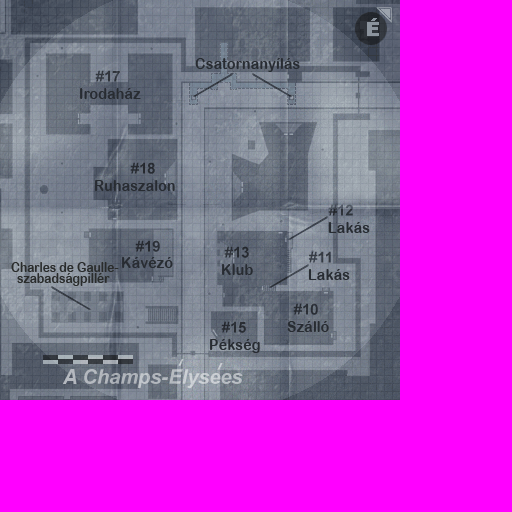
<style>
.page{position:relative;width:512px;height:512px;background:#ff00ff}
.page>*{position:absolute;margin:0}
.t1{font:15.3px "ArialRoundedCEBold";color:#282c32;scale:0.94 1}
.t2{font:13.3px "ArialRoundedCEBold";color:#2a2c2c;scale:0.9 1}
.t3{font:21.3px "Arial-BoldItalicMT";color:#b4b8bf;scale:0.94 1}
</style>
<div class="page">
<p class="t1" style="left:195px;top:58px;width:105px;height:14px">Csatornanyílás</p>
<p class="t1" style="left:80px;top:88px;width:61px;height:11px">Irodaház</p>
<p class="t1" style="left:95px;top:180px;width:80px;height:11px">Ruhaszalon</p>
<p class="t1" style="left:328px;top:222px;width:42px;height:11px">Lakás</p>
<p class="t1" style="left:122px;top:257px;width:51px;height:11px">Kávézó</p>
<p class="t2" style="left:11px;top:262px;width:108px;height:10px">Charles de Gaulle-</p>
<p class="t1" style="left:222px;top:264px;width:31px;height:11px">Klub</p>
<p class="t1" style="left:308px;top:269px;width:42px;height:11px">Lakás</p>
<p class="t2" style="left:17px;top:273px;width:93px;height:13px">szabadságpillér</p>
<p class="t1" style="left:287px;top:321px;width:42px;height:11px">Szálló</p>
<p class="t1" style="left:210px;top:339px;width:50px;height:14px">Pékség</p>
<p class="t3" style="left:62px;top:369px;width:15px;height:15px">A</p>
</div>
